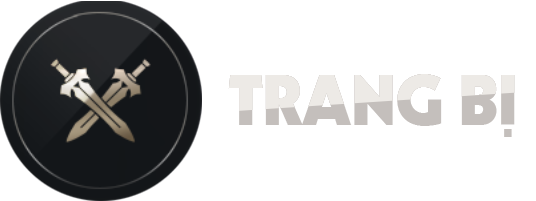
<style>
.page{position:relative;width:536px;height:201px;background:#ffffff}
.page>*{position:absolute;margin:0}
.t1{font:85.8px "SVN-Internation"}
</style>
<div class="page">
<p class="t1" style="left:228px;top:74px;width:287px;height:63px">TRANG BỊ</p>
</div>
